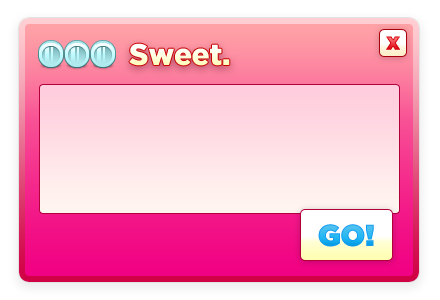
<style>
.page{position:relative;width:440px;height:300px}
.page>*{position:absolute;margin:0}
.t1{font:24px "Gotham-Black"}
.t2{font:30px "Gotham-Black";letter-spacing:-0.01em}
.t3{font:30px "Gotham-Ultra"}
</style>
<div class="page">
<p class="t1" style="left:386px;top:36px;width:14px;height:14px">x</p>
<p class="t2" style="left:129px;top:43px;width:101px;height:23px">Sweet.</p>
<p class="t3" style="left:318px;top:224px;width:56px;height:23px">GO!</p>
</div>
